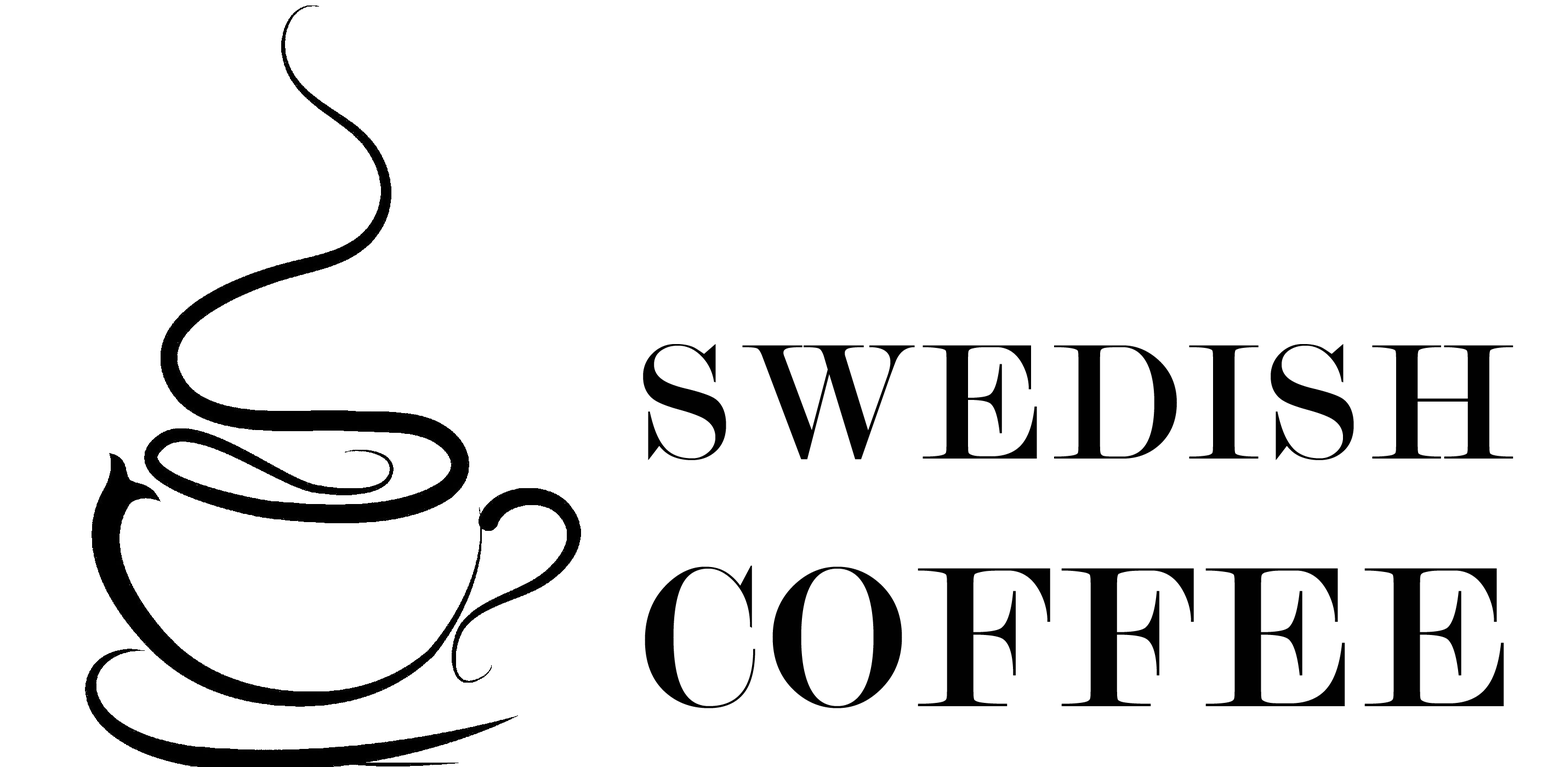
<style>
.page{position:relative;width:1554px;height:767px;background:#ffffff}
.page>*{position:absolute;margin:0}
.t1{font:175.4px "Modern-Regular";letter-spacing:0.05em;color:#010101}
.t2{font:213.8px "Modern-Regular";letter-spacing:0.05em;color:#010101}
</style>
<div class="page">
<p class="t1" style="left:643px;top:344px;width:870px;height:116px">SWEDISH</p>
<p class="t2" style="left:645px;top:566px;width:859px;height:143px">COFFEE</p>
</div>
